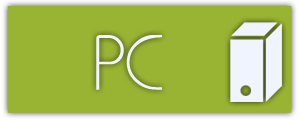
<style>
.page{position:relative;width:300px;height:120px;background:#99b433}
.page>*{position:absolute;margin:0}
.t1{font:90px "Metro-Normal";color:#eff4ff}
</style>
<div class="page">
<p class="t1" style="left:96px;top:35px;width:66px;height:55px">PC</p>
</div>
